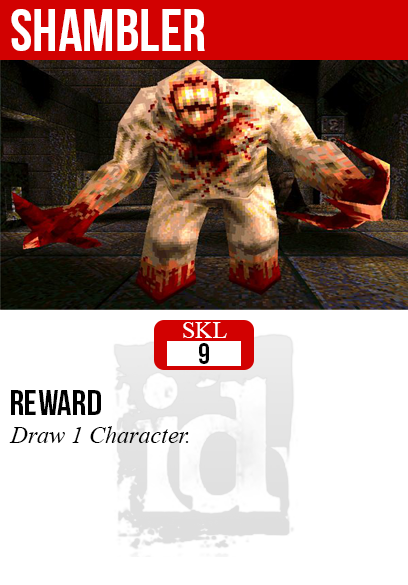
<style>
.page{position:relative;width:408px;height:585px;background:#ffffff}
.page>*{position:absolute;margin:0}
.t1{font:60px "BebasNeue";color:#ffffff}
.t2{font:24px "TimesNewRomanPSMT";color:#ffffff}
.t3{font:30px "BebasNeue";color:#000000}
.t4{font:36px "BebasNeue";color:#000000}
.t5{font:24px "TimesNewRomanPS-ItalicMT";color:#000000}
</style>
<div class="page">
<p class="t1" style="left:11px;top:9px;width:194px;height:42px">shambler</p>
<p class="t2" style="left:183px;top:322px;width:44px;height:16px">SKL</p>
<p class="t3" style="left:199px;top:343px;width:10px;height:21px">9</p>
<p class="t4" style="left:11px;top:390px;width:90px;height:25px">reward</p>
<p class="t5" style="left:9px;top:426px;width:180px;height:17px">Draw 1 Character.</p>
</div>
